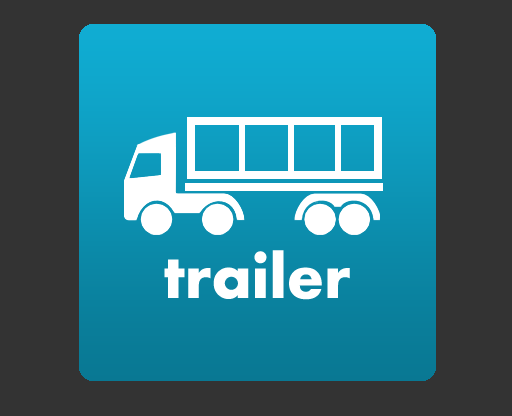
<style>
.page{position:relative;width:512px;height:416px;background:#333333}
.page>*{position:absolute;margin:0}
.t1{font:65px "Aharoni-Bold";color:#ffffff}
</style>
<div class="page">
<p class="t1" style="left:164px;top:250px;width:186px;height:50px">trailer</p>
</div>
